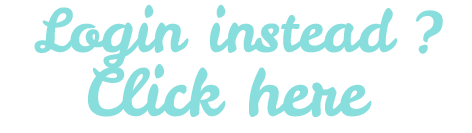
<style>
.page{position:relative;width:472px;height:133px;background:#ffffff}
.page>*{position:absolute;margin:0}
.t1{font:59px "LeckerliOne-Regular";color:#88dddd}
.t2{font:65px "LeckerliOne-Regular";color:#88dddd}
</style>
<div class="page">
<p class="t1" style="left:34px;top:4px;width:363px;height:65px">Login instead</p>
<p class="t1" style="left:416px;top:10px;width:27px;height:44px">?</p>
<p class="t2" style="left:88px;top:64px;width:284px;height:53px">Click here</p>
</div>
